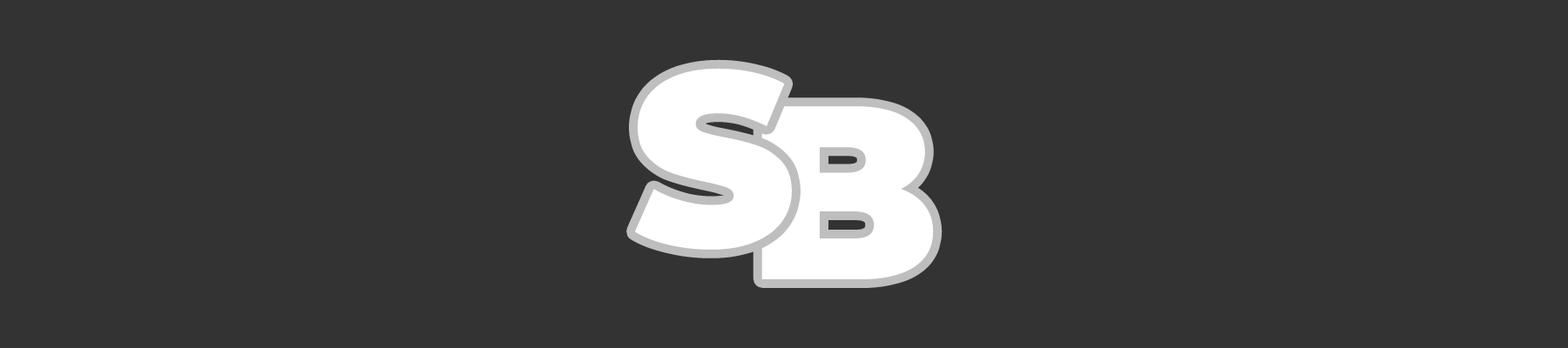
<style>
.page{position:relative;width:1568px;height:348px;background:#333333}
.page>*{position:absolute;margin:0}
.t1{font:247.2px "Montserrat-Black";color:#ffffff}
.t2{font:247.3px "Montserrat-Black";color:#ffffff}
</style>
<div class="page">
<p class="t1" style="left:635px;top:68px;width:157px;height:182px">S</p>
<p class="t2" style="left:761px;top:106px;width:173px;height:174px">B</p>
</div>
